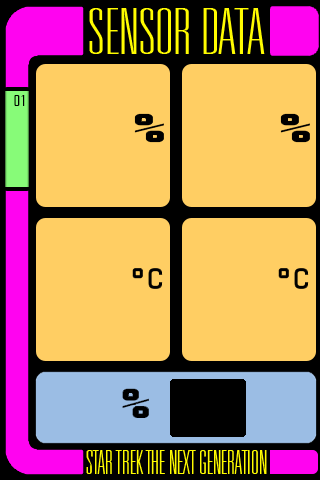
<style>
.page{position:relative;width:320px;height:480px;background:#ffce63}
.page>*{position:absolute;margin:0}
.t1{font:62.6px "NovaLightUltraSSiThinUltraCondensed";color:#fffc00;scale:1.23 1}
.t2{font:15.2px "NovaLightUltraSSiThinUltraCondensed";color:#000000;scale:1.97 1}
.t3{font:33.1px "NovaLightUltraSSiThinUltraCondensed";color:#fffc00}
</style>
<div class="page">
<p class="t1" style="left:89px;top:8px;width:176px;height:46px">SENSOR DATA</p>
<p class="t2" style="left:14px;top:95px;width:11px;height:11px">01</p>
<p class="t3" style="left:86px;top:450px;width:181px;height:24px">STAR TREK THE NEXT GENERATION</p>
</div>
